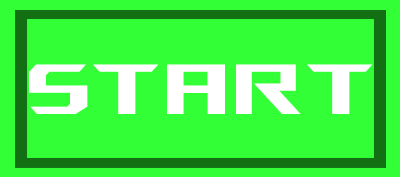
<style>
.page{position:relative;width:400px;height:177px;background:#33ff37}
.page>*{position:absolute;margin:0}
.t1{font:70.8px "AniMeMatrix-MB_EN";color:#ffffff;scale:1.05 1}
</style>
<div class="page">
<p class="t1" style="left:29px;top:64px;width:343px;height:50px">Start</p>
</div>
